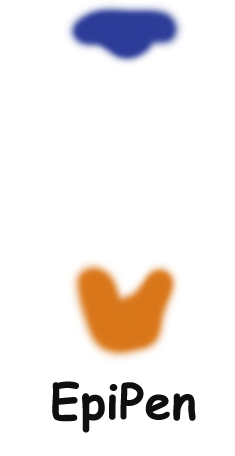
<style>
.page{position:relative;width:235px;height:456px;background:#ffffff}
.page>*{position:absolute;margin:0}
.t1{font:48px "ComicSansMS-Bold";color:#0f0f0f}
</style>
<div class="page">
<p class="t1" style="left:52px;top:381px;width:144px;height:52px">EpiPen</p>
</div>
